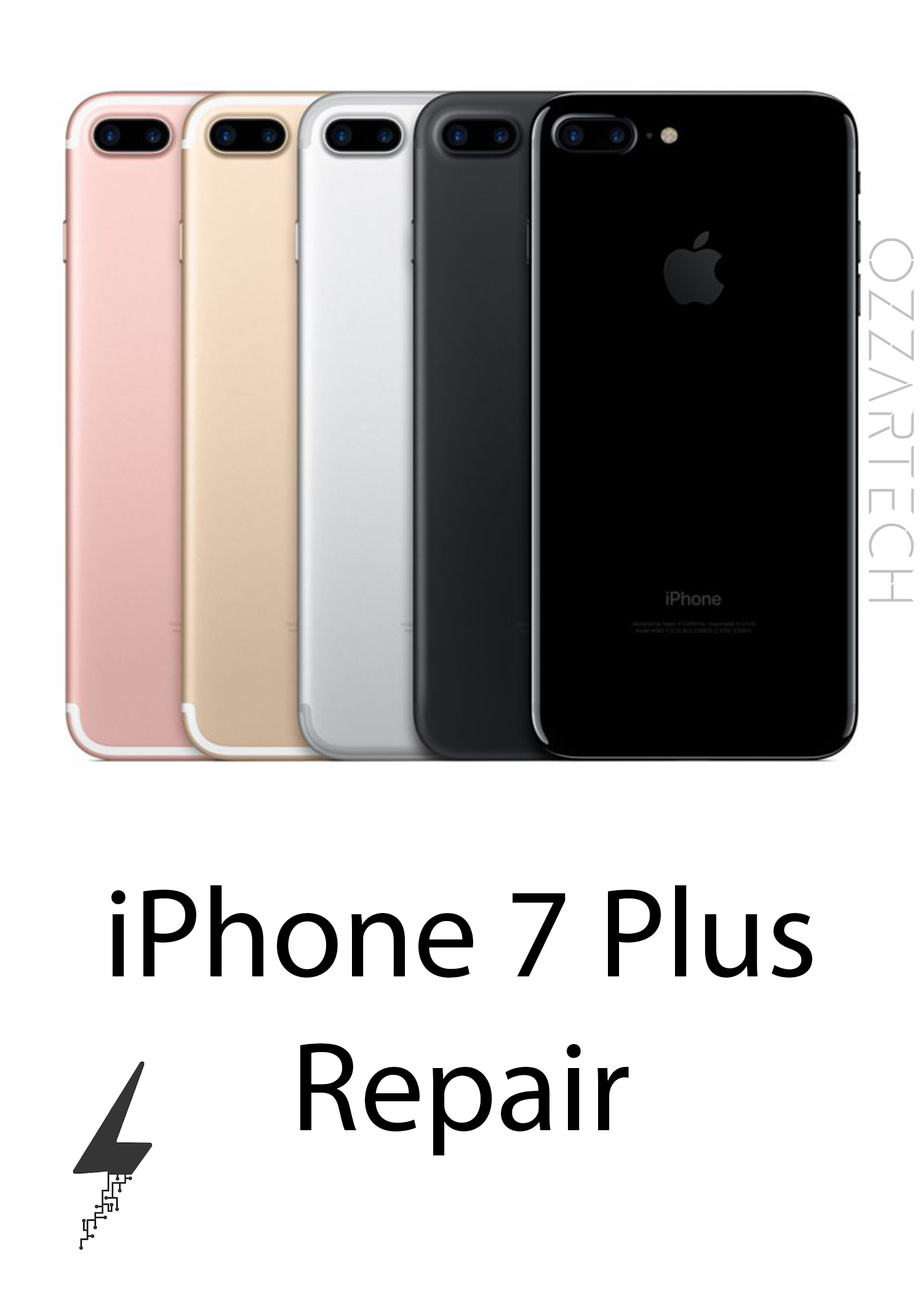
<style>
.page{position:relative;width:923px;height:1292px;background:#ffffff}
.page>*{position:absolute;margin:0}
.t1{font:64.1px "Gluon-Light";color:#c2c2c2}
.t2{font:128.2px "MyriadPro-Regular";color:#000000}
</style>
<div class="page">
<p class="t1" style="left:869px;top:238px;width:45px;height:364px;rotate:90deg">OzzarTech</p>
<p class="t2" style="left:111px;top:885px;width:701px;height:270px;text-align:center">iPhone 7 Plus<br>Repair</p>
</div>
